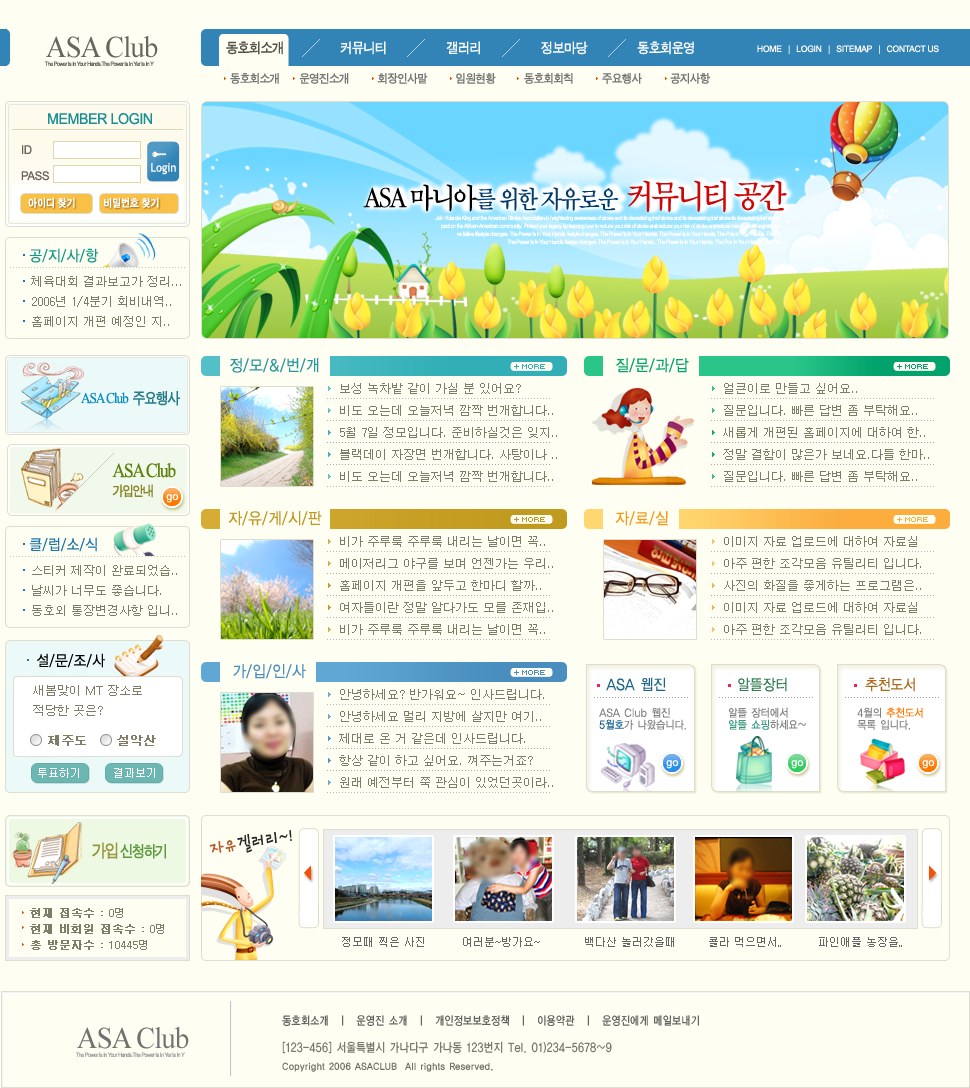
<style>
.page{position:relative;width:970px;height:1088px;background:#fefef2}
.page>*{position:absolute;margin:0}
.t1{font:30px "TimesNewRomanPSMT";letter-spacing:-0.03em;color:#67665e;scale:0.95 1}
.t2{font:14px "SandTg";letter-spacing:-0.03em;color:#ffffff;scale:0.95 1}
.t3{font:14px "SandTg";letter-spacing:-0.03em;color:#545249;scale:0.95 1}
.t4{font:9px "ArialMT";letter-spacing:-0.03em;color:#ffffff;scale:0.95 1}
.t5{font:12px "SandTg";letter-spacing:-0.03em;color:#757574;scale:0.95 1}
.t6{font:15px "ArialMT";letter-spacing:-0.03em;color:#198f96;scale:0.95 1}
.t7{font:12px/26px "ArialMT";letter-spacing:-0.03em;color:#6d6460;scale:0.95 1}
.t8{font:12px/24px "ArialMT";letter-spacing:-0.03em;color:#6d6460;scale:0.95 1}
.t9{font:12px "TrebuchetMS";color:#ffffff;scale:0.9 1}
.t10{font:26px "SandTm";letter-spacing:-0.075em;color:#003c6c;scale:0.88 1}
.t11{font:30px "TimesNewRomanPSMT";letter-spacing:-0.075em;color:#313131;scale:0.88 1}
.t12{font:30px "SandTm";letter-spacing:-0.075em;color:#000000;scale:0.88 1}
.t13{font:35px "SandTm";letter-spacing:-0.075em;color:#cb0707;scale:0.88 1}
.t14{font:11px "SandKg";color:#ffffff;scale:0.9 1}
.t15{font:15px "YGO12";letter-spacing:-0.06em;color:#109886;scale:0.9 1}
.t16{font:12px/20px "Dotum";color:#7f7d67}
.t17{font:16px "YGO12";letter-spacing:-0.06em;color:#27979d;scale:0.9 1}
.t18{font:16px "YGO12";letter-spacing:-0.06em;color:#02a36c;scale:0.9 1}
.t19{font:12px/22px "Dotum";color:#7f7d67}
.t20{font:15px "TimesNewRomanPSMT";letter-spacing:-0.075em;color:#0a8dc4;scale:0.88 1}
.t21{font:16px "SandTg";letter-spacing:-0.075em;color:#277b88;scale:0.88 1}
.t22{font:20px/18px "TimesNewRomanPSMT";letter-spacing:-0.075em;color:#5f830e;scale:0.88 1}
.t23{font:14px/18px "SandTg";letter-spacing:-0.075em;color:#888527;scale:0.88 1}
.t24{font:16px "YGO12";letter-spacing:-0.06em;color:#bf9822;scale:0.9 1}
.t25{font:16px "YGO12";letter-spacing:-0.06em;color:#f69915;scale:0.9 1}
.t26{font:15px "YGO12";letter-spacing:-0.06em;color:#1b76aa;scale:0.9 1}
.t27{font:15px "YGO12";letter-spacing:-0.06em;color:#000000;scale:0.9 1}
.t28{font:16px "YGO12";letter-spacing:-0.06em;color:#4a8ebf;scale:0.9 1}
.t29{font:15px "YGO12";letter-spacing:-0.06em;color:#1a648a;scale:0.9 1}
.t30{font:15px "YGO12";letter-spacing:-0.06em;color:#328053;scale:0.9 1}
.t31{font:15px "YGO12";letter-spacing:-0.06em;color:#a76c1a;scale:0.9 1}
.t32{font:12px/10px "Dotum";color:#7f7d67;font-weight:bold}
.t33{font:11px/12px "YGO12";letter-spacing:-0.06em;color:#82817e;scale:0.9 1}
.t34{font:11px/12px "YGO12";letter-spacing:-0.06em;color:#1a648a;scale:0.9 1}
.t35{font:11px/12px "YGO12";letter-spacing:-0.06em;color:#35957d;scale:0.9 1}
.t36{font:11px/12px "YGO12";letter-spacing:-0.06em;color:#ff7800;scale:0.9 1}
.t37{font:11px "Dotum";color:#ffffff}
.t38{font:20px "TownM-KSCpc-EUC-H";letter-spacing:-0.22em;color:#282828;scale:0.9 1}
.t39{font:20px "TownM-KSCpc-EUC-H";letter-spacing:-0.22em;color:#b55d2a;scale:0.9 1}
.t40{font:16px "SandTg";letter-spacing:-0.075em;color:#609940;scale:0.88 1}
.t41{font:18px "SandTg";letter-spacing:-0.075em;color:#999640;scale:0.88 1}
.t42{font:11px/16px "Dotum";color:#7f7d67;font-weight:bold}
.t43{font:11px/16px "Dotum";color:#7f7d67}
.t44{font:11px "Dotum";color:#666666}
.t45{font:11.6px "YGO12";letter-spacing:-0.025em;color:#585858;scale:0.83 1}
.t46{font:30px "TimesNewRomanPSMT";letter-spacing:-0.03em;color:#737272;scale:0.95 1}
.t47{font:12.1px/18px "YGO12";letter-spacing:-0.025em;color:#706f62;scale:0.82 1}
.t48{font:9px/18px "YGO12";letter-spacing:-0.01em;color:#706f62;scale:0.9 1}
</style>
<div class="page">
<p class="t1" style="left:46px;top:36px;width:112px;height:22px">ASA Club</p>
<p class="t2" style="left:226px;top:41px;width:468px;height:14px"><span class="t3">동호회소개 </span>                커뮤니티                  갤러리                  정보마당               동호회운영</p>
<p class="t4" style="left:757px;top:45px;width:182px;height:9px">HOME   |   LOGIN   |   SITEMAP   |   CONTACT US</p>
<p class="t5" style="left:230px;top:73px;width:480px;height:11px">동호회소개       운영진소개          회장인사말          임원현황          동호회회칙          주요행사          공지사항</p>
<p class="t6" style="left:48px;top:113px;width:104px;height:12px">MEMBER LOGIN</p>
<p class="t7" style="left:21px;top:145px;width:28px;height:36px"><span class="t8">ID<br></span>PASS</p>
<p class="t9" style="left:151px;top:163px;width:25px;height:12px">Login</p>
<p class="t10" style="left:363px;top:180px;width:424px;height:32px"><span class="t11">                                     <br></span><span class="t12">ASA 마니아</span>를 위한 자유로운  <span class="t13">커뮤니티 공간</span></p>
<p class="t14" style="left:28px;top:197px;width:131px;height:11px">아이디 찾기          비밀번호 찾기</p>
<p class="t15" style="left:29px;top:248px;width:69px;height:15px">공/지/사/항</p>
<p class="t16" style="left:31px;top:276px;width:150px;height:51px">체육대회 결과보고가 정리...<br>2006년 1/4분기 회비내역..       <br>홈페이지 개편 예정인 지..</p>
<p class="t17" style="left:230px;top:358px;width:89px;height:15px">정/모/&amp;/번/개</p>
<p class="t18" style="left:616px;top:358px;width:73px;height:15px">질/문/과/답</p>
<p class="t19" style="left:340px;top:383px;width:217px;height:99px">보성 녹차밭 같이 가실 분 있어요?       <br>비도 오는데 오늘저녁 깜짝 번개합니다..<br>5월 7일 정모입니다. 준비하실것은 잊지..       <br>블랙데이 자장면 번개합니다. 사탕이나 .. <br>비도 오는데 오늘저녁 깜짝 번개합니다..</p>
<p class="t19" style="left:723px;top:383px;width:206px;height:99px">얼큰이로 만들고 싶어요..<br>질문입니다. 빠른 답변 좀 부탁해요..<br>새롭게 개편된 홈페이지에 대하여 한..<br>정말 결함이 많은가 보네요.다들 한마..<br>질문입니다. 빠른 답변 좀 부탁해요..</p>
<p class="t20" style="left:81px;top:391px;width:99px;height:15px">ASA Club  <span class="t21">주요행사</span></p>
<p class="t22" style="left:112px;top:463px;width:64px;height:35px">ASA Club <br><span class="t23">가입안내</span></p>
<p class="t24" style="left:228px;top:511px;width:94px;height:15px">자/유/게/시/판</p>
<p class="t25" style="left:615px;top:511px;width:53px;height:15px">자/료/실</p>
<p class="t26" style="left:29px;top:537px;width:68px;height:15px">클/럽/소/식</p>
<p class="t19" style="left:340px;top:536px;width:213px;height:99px">비가 주루룩 주루룩 내리는 날이면 꼭..<br>메이저리그 야구를 보며 언젠가는 우리..<br>홈페이지 개편을 앞두고 한마디 할까..       <br>여자들이란 정말 알다가도 모를 존재입.. <br>비가 주루룩 주루룩 내리는 날이면 꼭..</p>
<p class="t19" style="left:724px;top:536px;width:197px;height:99px">이미지 자료 업로드에 대하여 자료실   <br>아주 편한 조각모음 유틸리티 입니다.<br>사진의 화질을 좋게하는 프로그램은..<br>이미지 자료 업로드에 대하여 자료실   <br>아주 편한 조각모음 유틸리티 입니다.</p>
<p class="t16" style="left:32px;top:565px;width:145px;height:51px">스티커 제작이 완료되었습..<br>날씨가 너무도 좋습니다.<br>동호외 통장변경사항 입니..</p>
<p class="t27" style="left:37px;top:653px;width:68px;height:15px">설/문/조/사</p>
<p class="t28" style="left:233px;top:664px;width:73px;height:15px">가/입/인/사</p>
<p class="t29" style="left:606px;top:677px;width:309px;height:15px">ASA 웹진            <span class="t30">알뜰장터             </span><span class="t31">추천도서</span></p>
<p class="t16" style="left:33px;top:685px;width:123px;height:61px">새봄맞이 MT 장소로<br>적당한 곳은? <br><br><span class="t32">   제주도      설악산</span></p>
<p class="t19" style="left:339px;top:689px;width:214px;height:99px">안녕하세요? 반가워요~ 인사드립니다. <br>안녕하세요 멀리 지방에 살지만 여기..<br>제대로 온 거 같은데 인사드립니다.      <br>항상 같이 하고 싶어요. 껴주는거죠?<br>원래 예전부터 쭉 관심이 있었던곳이라..</p>
<p class="t33" style="left:599px;top:707px;width:87px;height:23px">ASA Club 웹진<br><span class="t34">5월호</span>가 나왔습니다.</p>
<p class="t33" style="left:728px;top:707px;width:78px;height:23px">알뜰 장터에서 <br><span class="t35">알뜰 쇼핑</span>하세요~</p>
<p class="t33" style="left:857px;top:707px;width:66px;height:23px">4월의 <span class="t36">추천도서 <br></span>목록 입니다.</p>
<p class="t37" style="left:38px;top:768px;width:117px;height:10px">투표하기        결과보기</p>
<p class="t38" style="left:209px;top:830px;width:83px;height:23px;rotate:-9deg"><span class="t39">자유</span>겔러리~!</p>
<p class="t40" style="left:92px;top:842px;width:74px;height:17px"><span class="t41">가입 </span>신청하기</p>
<p class="t42" style="left:30px;top:908px;width:134px;height:42px">현재 접속수 :<span class="t43"> 0명<br></span>현재 비회원 접속수 :<span class="t43"> 0명<br></span>총 방문자수 :<span class="t43"> 10445명</span></p>
<p class="t44" style="left:342px;top:937px;width:560px;height:10px">정모때 찍은 사진         여러분~방가요~           백다산 놀러갔을때        콜라 먹으면서..         파인애플 농장을..</p>
<p class="t45" style="left:282px;top:1015px;width:417px;height:11px">동호회소개  ㅣ  운영진 소개  ㅣ  개인정보보호정책  ㅣ  이용약관  ㅣ  운영진에게 메일보내기</p>
<p class="t46" style="left:77px;top:1027px;width:112px;height:22px">ASA Club</p>
<p class="t47" style="left:282px;top:1041px;width:330px;height:31px">[123-456] 서울특별시 가나다구 가나동 123번지 Tel. 01)234-5678~9<br><span class="t48">Copyright 2006 ASACLUB  All rights Reserved.</span></p>
</div>
